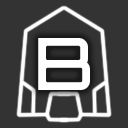
<style>
.page{position:relative;width:128px;height:128px;background:#333333}
.page>*{position:absolute;margin:0}
.t1{font:72px "Orbitron-Medium";color:#ffffff}
</style>
<div class="page">
<p class="t1" style="left:38px;top:38px;width:52px;height:52px">B</p>
</div>
